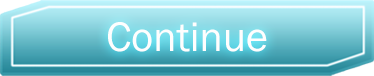
<style>
.page{position:relative;width:374px;height:76px}
.page>*{position:absolute;margin:0}
.t1{font:42.8px "FranklinGothic-Book";color:#fffefe}
</style>
<div class="page">
<p class="t1" style="left:108px;top:22px;width:159px;height:30px">Continue</p>
</div>
